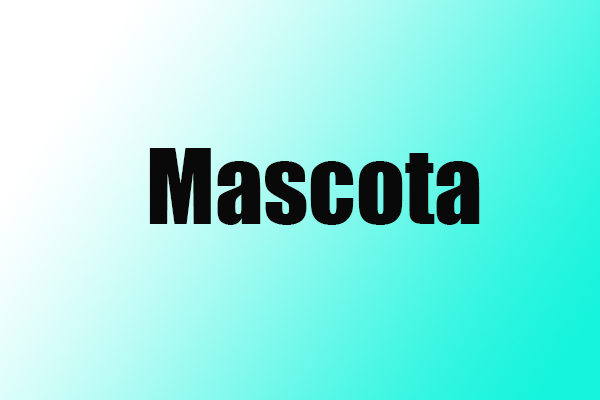
<style>
.page{position:relative;width:600px;height:400px}
.page>*{position:absolute;margin:0}
.t1{font:96px "Impact";color:#090909}
</style>
<div class="page">
<p class="t1" style="left:149px;top:148px;width:331px;height:77px">Mascota</p>
</div>
